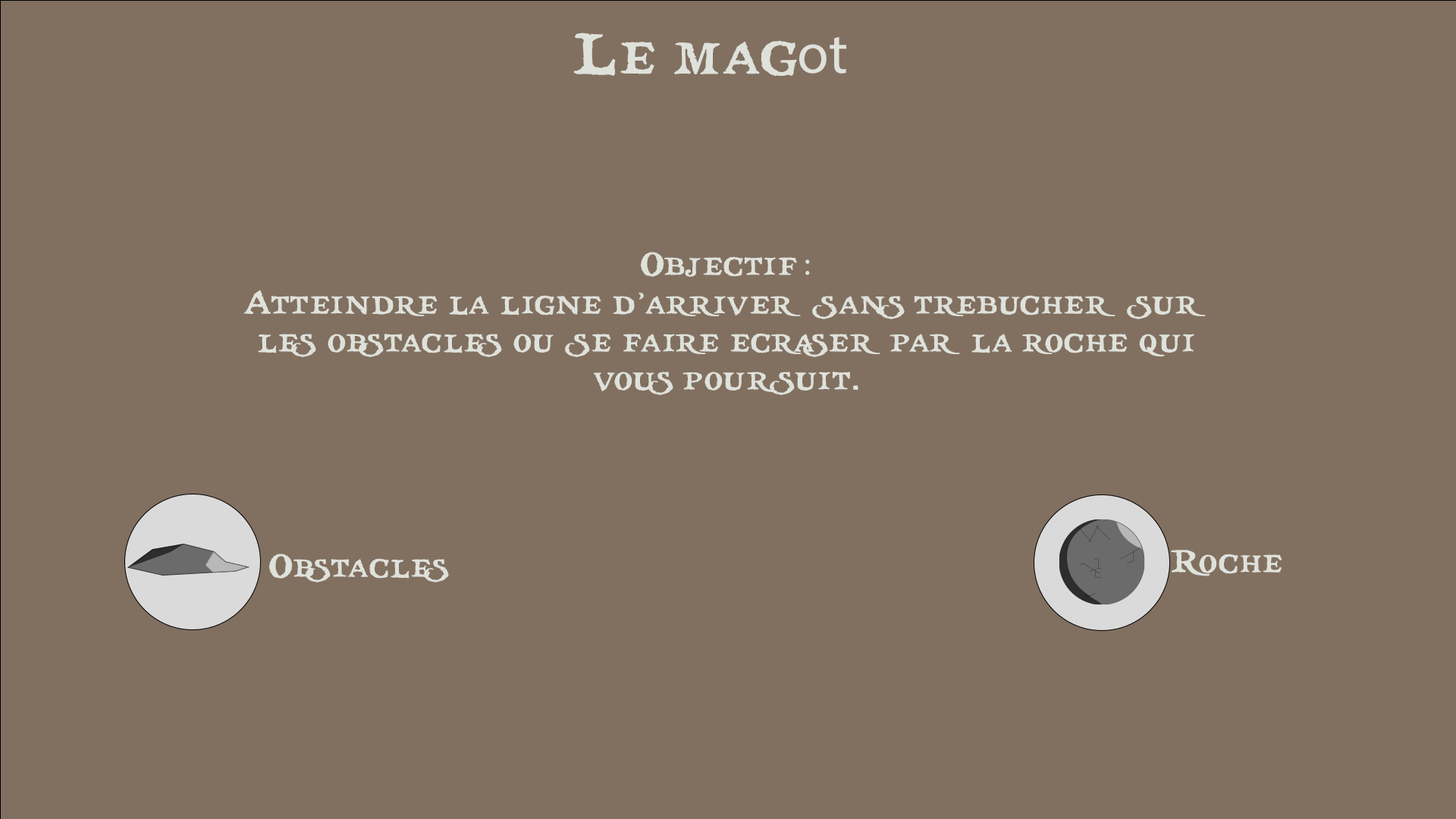
<style>
.page{position:relative;width:1456px;height:819px;background:#817060}
.page>*{position:absolute;margin:0}
.t1{font:57.6px "treasuremap";color:#dfe1db}
.t2{font:57.6px "MyriadPro-Regular";color:#dfe1db}
.t3{font:31.8px "treasuremap";color:#dfe1db}
.t4{font:31.8px "MyriadPro-Regular";color:#dfe1db}
</style>
<div class="page">
<p class="t1" style="left:574px;top:33px;width:272px;height:44px">Le mag<span class="t2">ot</span></p>
<p class="t3" style="left:244px;top:252px;width:962px;height:143px;text-align:center">Objectif<span class="t4"> : <br></span>Atteindre la ligne d’arriver sans trebucher sur les obstacles ou se faire ecraser par la roche qui vous poursuit.</p>
<p class="t3" style="left:268px;top:554px;width:181px;height:28px">Obstacles</p>
<p class="t3" style="left:1171px;top:550px;width:111px;height:26px">Roche</p>
</div>
